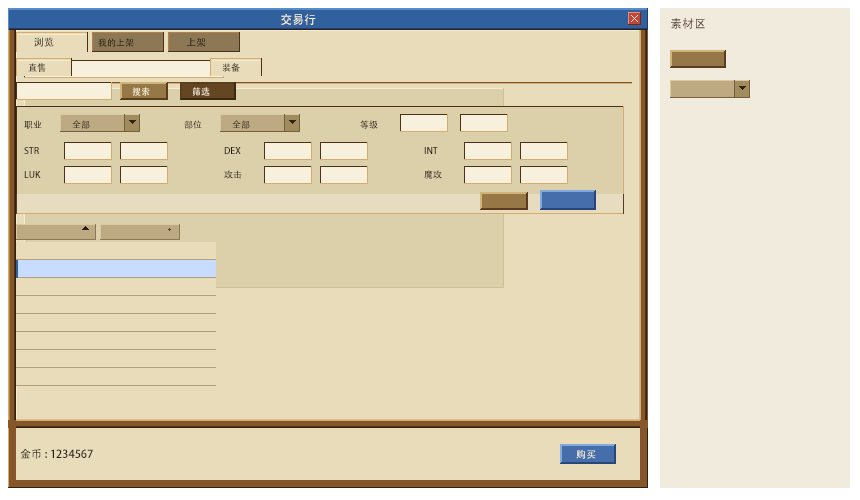
<style>
.page{position:relative;width:860px;height:500px;background:#e8dcba}
.page>*{position:absolute;margin:0}
.t1{font:12px "AdobeHeitiStd-Regular";color:#fff5dc}
.t2{font:12px "AdobeHeitiStd-Regular";color:#503c28}
.t3{font:10px "AdobeHeitiStd-Regular"}
.t4{font:9px "AdobeHeitiStd-Regular";color:#281e14}
.t5{font:10px "AdobeHeitiStd-Regular";color:#281e14}
.t6{font:9px "AdobeHeitiStd-Regular"}
.t7{font:9px "AdobeHeitiStd-Regular";color:#fff5dc}
.t8{font:11px "AdobeHeitiStd-Regular";color:#281e14}
.t9{font:10px "AdobeHeitiStd-Regular";color:#fff5dc}
</style>
<div class="page">
<p class="t1" style="left:281px;top:14px;width:35px;height:11px">交易行</p>
<p class="t2" style="left:671px;top:18px;width:34px;height:11px">素材区</p>
<p class="t3" style="left:34px;top:37px;width:20px;height:10px">浏览</p>
<p class="t4" style="left:98px;top:38px;width:36px;height:9px">我的上架</p>
<p class="t5" style="left:186px;top:37px;width:20px;height:10px">上架</p>
<p class="t6" style="left:28px;top:63px;width:18px;height:9px">直售</p>
<p class="t4" style="left:222px;top:63px;width:18px;height:9px">装备</p>
<p class="t7" style="left:132px;top:87px;width:18px;height:9px">搜索</p>
<p class="t7" style="left:192px;top:87px;width:18px;height:9px">筛选</p>
<p class="t6" style="left:24px;top:120px;width:18px;height:9px">职业</p>
<p class="t6" style="left:72px;top:120px;width:18px;height:9px">全部</p>
<p class="t6" style="left:184px;top:120px;width:18px;height:9px">部位</p>
<p class="t6" style="left:232px;top:120px;width:18px;height:9px">全部</p>
<p class="t6" style="left:360px;top:120px;width:18px;height:9px">等级</p>
<p class="t6" style="left:24px;top:147px;width:15px;height:7px">STR</p>
<p class="t4" style="left:224px;top:147px;width:17px;height:7px">DEX</p>
<p class="t4" style="left:424px;top:147px;width:14px;height:7px">INT</p>
<p class="t4" style="left:24px;top:171px;width:17px;height:7px">LUK</p>
<p class="t6" style="left:224px;top:170px;width:18px;height:9px">攻击</p>
<p class="t6" style="left:424px;top:170px;width:18px;height:9px">魔攻</p>
<p class="t8" style="left:20px;top:448px;width:73px;height:11px">金币: 1234567</p>
<p class="t9" style="left:576px;top:449px;width:20px;height:10px">购买</p>
</div>
